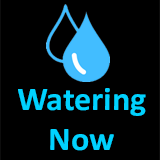
<style>
.page{position:relative;width:160px;height:160px;background:#000000}
.page>*{position:absolute;margin:0}
.t1{font:33.3px "Calibri-Bold";color:#00d2ff}
</style>
<div class="page">
<p class="t1" style="left:18px;top:88px;width:128px;height:63px;text-align:center">Watering<br>Now</p>
</div>
